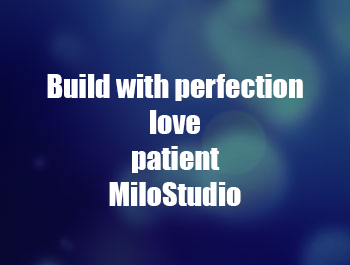
<style>
.page{position:relative;width:350px;height:265px}
.page>*{position:absolute;margin:0}
.t1{font:30px "Impact";color:#ffffff}
</style>
<div class="page">
<p class="t1" style="left:47px;top:74px;width:256px;height:132px;text-align:center">Build with perfection<br>love<br>patient<br>MiloStudio</p>
</div>
